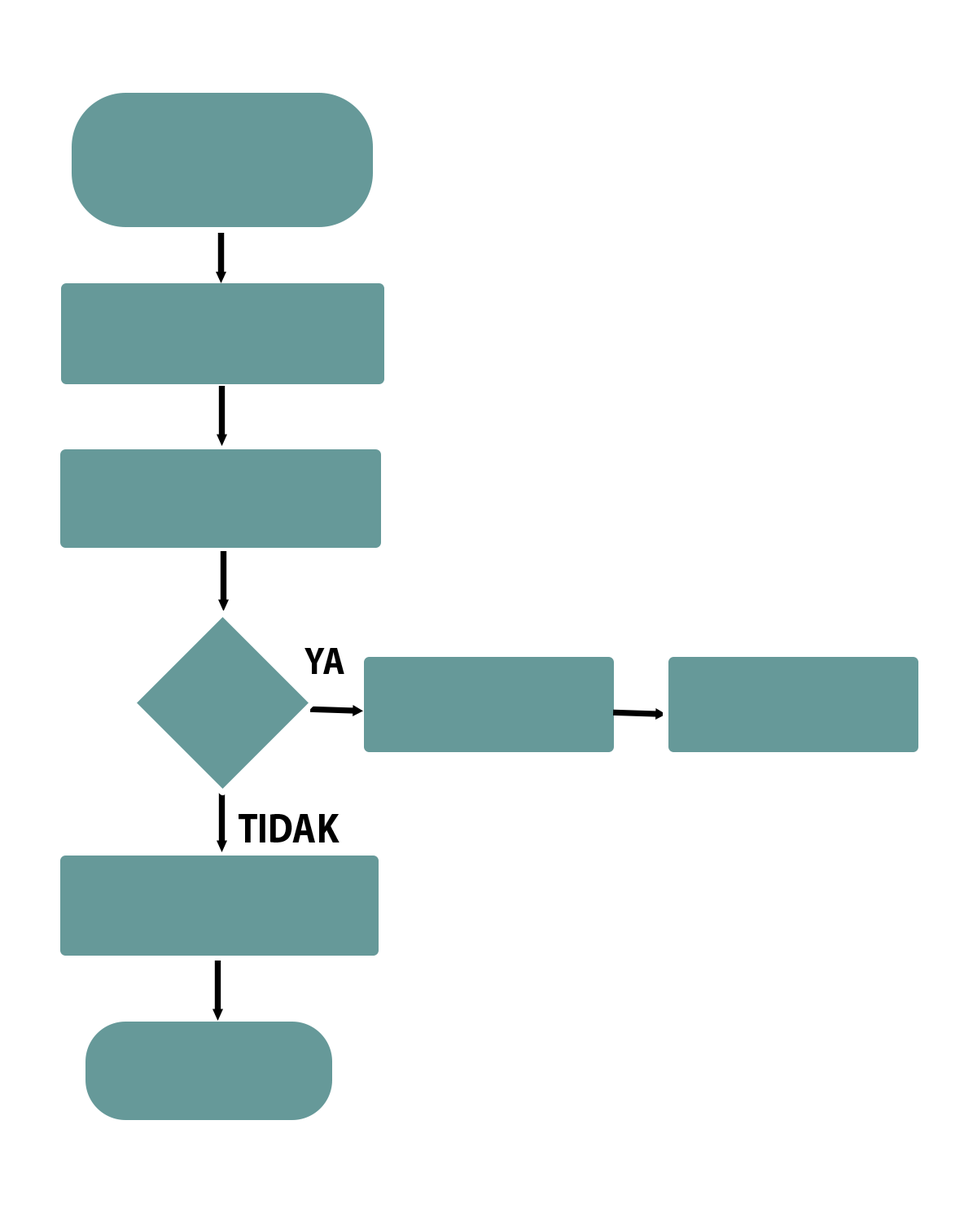
<style>
.page{position:relative;width:977px;height:1221px;background:#ffffff}
.page>*{position:absolute;margin:0}
.t1{font:38.5px "MyriadPro-Bold";color:#000000;scale:0.88 1}
.t2{font:41.2px "MyriadPro-Bold";color:#000000;scale:0.88 1}
</style>
<div class="page">
<p class="t1" style="left:304px;top:648px;width:40px;height:26px">YA</p>
<p class="t2" style="left:238px;top:814px;width:101px;height:28px">TIDAK</p>
</div>
